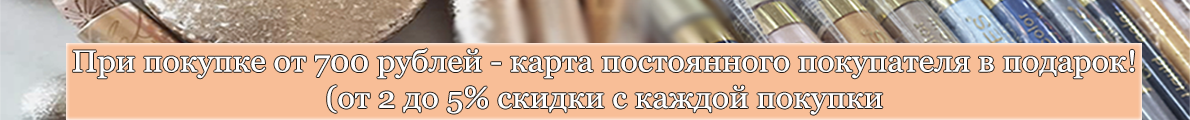
<style>
.page{position:relative;width:1190px;height:120px;background:#f8be97}
.page>*{position:absolute;margin:0}
.t1{font:30.3px "Georgia";color:#fefefe;scale:1.06 1}
</style>
<div class="page">
<p class="t1" style="left:73px;top:48px;width:1062px;height:67px;text-align:center">При покупке от 700 рублей - карта постоянного покупателя в подарок!<br>(от 2 до 5% скидки с каждой покупки</p>
</div>
